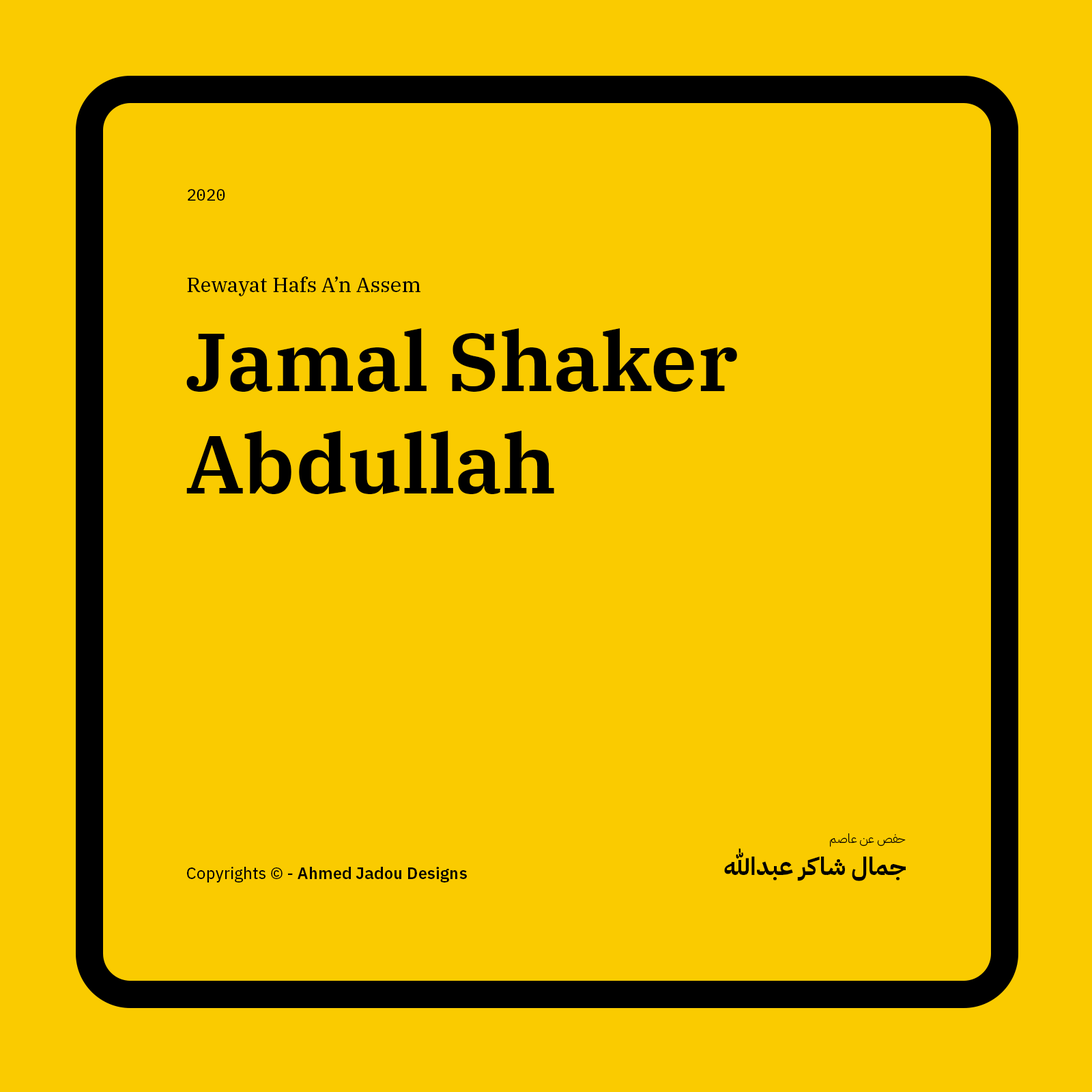
<style>
.page{position:relative;width:1092px;height:1092px;background:#facb00}
.page>*{position:absolute;margin:0}
.t1{font:16.4px "IBMPlexMono-Text";color:#000000}
.t2{font:20.5px "IBMPlexSerif-Text";color:#000000}
.t3{font:81.9px/102.7px "IBMPlexSerif-SemiBold";color:#000000}
.t4{font:12.3px "IBMPlexArabic-Light";color:#000000}
.t5{font:24.6px "IBMPlexArabic-Bold";color:#000000}
.t6{font:16.4px "IBMPlexSans-SemiBold";color:#000000}
.t7{font:16.4px "IBMPlexSans-Text";color:#000000}
</style>
<div class="page">
<p class="t1" style="left:188px;top:189px;width:37px;height:12px">2020</p>
<p class="t2" style="left:187px;top:276px;width:233px;height:20px">Rewayat Hafs A’n Assem</p>
<p class="t3" style="left:186px;top:328px;width:551px;height:166px">Jamal Shaker Abdullah</p>
<p class="t4" style="left:830px;top:833px;width:76px;height:14px">حفص عن عاصم</p>
<p class="t5" style="left:724px;top:848px;width:182px;height:33px">جمال شاكر عبدالله</p>
<p class="t6" style="left:187px;top:867px;width:280px;height:15px"><span class="t7">Copyrights © - </span>Ahmed Jadou Designs</p>
</div>
